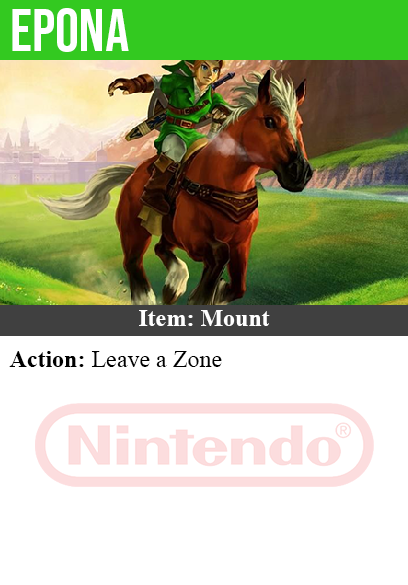
<style>
.page{position:relative;width:408px;height:585px;background:#ffffff}
.page>*{position:absolute;margin:0}
.t1{font:60px "BebasNeue-Regular";color:#ffffff}
.t2{font:24px "TimesNewRomanPS-BoldMT";color:#ffffff}
.t3{font:24px "TimesNewRomanPSMT";color:#000000}
.t4{font:24px "TimesNewRomanPS-BoldMT";color:#000000}
</style>
<div class="page">
<p class="t1" style="left:12px;top:8px;width:117px;height:44px">epona</p>
<p class="t2" style="left:139px;top:310px;width:131px;height:16px">Item: Mount</p>
<p class="t3" style="left:9px;top:351px;width:213px;height:16px"><span class="t4">Action:</span> Leave a Zone</p>
</div>
